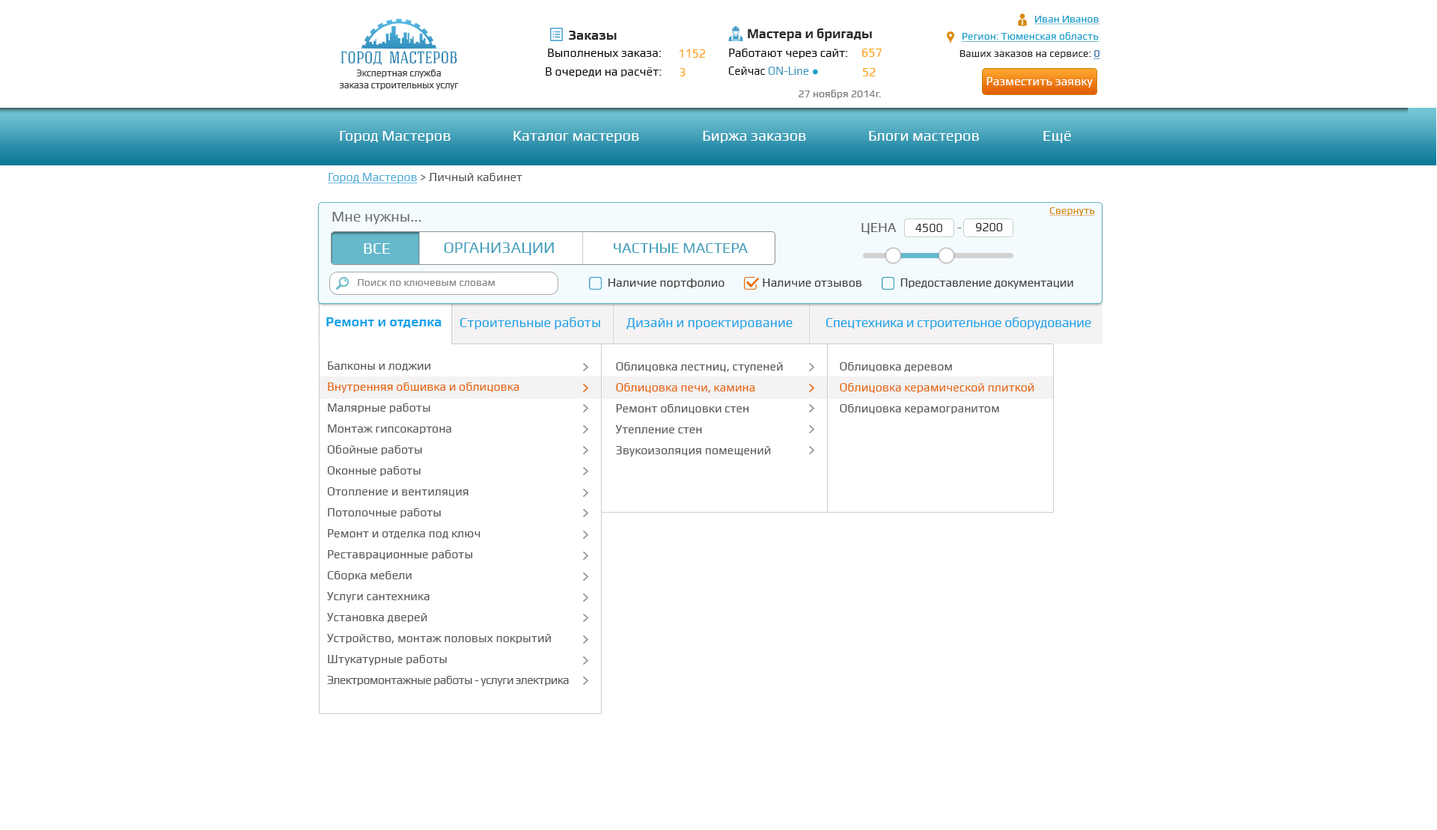
<style>
.page{position:relative;width:1437px;height:830px;background:#ffffff}
.page>*{position:absolute;margin:0}
.t1{font:10.5px "Play";color:#179ecb;text-decoration:underline}
.t2{font:13.2px "Play-Bold";color:#2a2a2a}
.t3{font:13.5px "Play-Bold";color:#2a2a2a}
.t4{font:10.5px "Play";color:#19a0cc;text-decoration:underline}
.t5{font:12px "Play";color:#000000}
.t6{font:11.9px "Play";color:#ff9e07}
.t7{font:12px "Play";color:#ff9e07}
.t8{font:10.5px "Play";color:#2a2a2a}
.t9{font:10.5px "Play";color:#226da7;text-decoration:underline}
.t10{font:9.7px "Play";letter-spacing:-0.016em;color:#403f3f}
.t11{font:12px "Play";color:#3c95bf;scale:0.95 1}
.t12{font:12px "Play";color:#000000;scale:0.95 1}
.t13{font:12px "Play";color:#ffffff}
.t14{font:10.5px "Play";color:#7a7a7a}
.t15{font:15px "Play";color:#ffffff}
.t16{font:12px "Play";color:#565656}
.t17{font:12px "Play";color:#4daeda;text-decoration:underline}
.t18{font:10.5px "Play";color:#da8a0d;text-decoration:underline}
.t19{font:15px "Play";color:#707070}
.t20{font:13.5px "Play";color:#5f5f5f}
.t21{font:12.2px "Play";color:#272727}
.t22{font:12px "Play";color:#726b6b}
.t23{font:12px "Play";color:#272727}
.t24{font:15.7px "Play";color:#ffffff}
.t25{font:15.7px "Play";color:#45a1bc}
.t26{font:15px "Play";color:#45a1bc}
.t27{font:10.5px "Play";color:#8a8989}
.t28{font:12px "Play";color:#3a3a3a}
.t29{font:12px "Play";letter-spacing:-0.01em;color:#3a3a3a}
.t30{font:13.5px "Play-Bold";color:#1aa3e9}
.t31{font:13.6px "Play";color:#1aa3e9}
.t32{font:13.3px "Play";letter-spacing:-0.02em;color:#1aa3e9}
.t33{font:13.4px "Play";color:#1aa3e9}
.t34{font:12px/21px "Play";color:#575757}
.t35{font:12px/21px "Play";color:#e56407}
.t36{font:12px/21px "Play";letter-spacing:-0.04em;color:#575757}
</style>
<div class="page">
<p class="t1" style="left:1034px;top:16px;width:65px;height:9px">Иван Иванов</p>
<p class="t2" style="left:748px;top:28px;width:124px;height:13px">Мастера и бригады</p>
<p class="t3" style="left:569px;top:31px;width:48px;height:9px">Заказы</p>
<p class="t4" style="left:962px;top:32px;width:137px;height:10px">Регион: Тюменская область</p>
<p class="t5" style="left:548px;top:49px;width:114px;height:8px">Выполненых заказа:</p>
<p class="t6" style="left:679px;top:49px;width:26px;height:9px">1152</p>
<p class="t5" style="left:729px;top:49px;width:119px;height:9px">Работают через сайт:</p>
<p class="t7" style="left:862px;top:49px;width:20px;height:8px">657</p>
<p class="t8" style="left:959px;top:50px;width:141px;height:9px">Ваших заказов на сервисе: <span class="t9">0</span></p>
<p class="t10" style="left:339px;top:70px;width:120px;height:20px;text-align:center">Экспертная служба <br>заказа строительных услуг</p>
<p class="t5" style="left:546px;top:67px;width:116px;height:10px">В очереди на расчёт:</p>
<p class="t6" style="left:679px;top:68px;width:6px;height:8px">3</p>
<p class="t11" style="left:728px;top:67px;width:81px;height:8px"><span class="t12">Сейчас </span>ON-Line</p>
<p class="t7" style="left:863px;top:68px;width:13px;height:8px">52</p>
<p class="t13" style="left:986px;top:77px;width:107px;height:11px">Разместить заявку</p>
<p class="t14" style="left:798px;top:90px;width:83px;height:9px">27 ноября 2014г.</p>
<p class="t15" style="left:340px;top:131px;width:111px;height:12px">Город Мастеров</p>
<p class="t15" style="left:513px;top:131px;width:126px;height:12px">Каталог мастеров</p>
<p class="t15" style="left:703px;top:131px;width:103px;height:12px">Биржа заказов</p>
<p class="t15" style="left:869px;top:131px;width:110px;height:12px">Блоги мастеров</p>
<p class="t15" style="left:1043px;top:131px;width:28px;height:12px">Ещё</p>
<p class="t16" style="left:328px;top:173px;width:194px;height:10px"><span class="t17">Город Мастеров </span>&gt; Личный кабинет</p>
<p class="t18" style="left:1049px;top:207px;width:46px;height:9px">Свернуть</p>
<p class="t19" style="left:332px;top:212px;width:89px;height:13px">Мне нужны...</p>
<p class="t20" style="left:861px;top:223px;width:36px;height:11px">ЦЕНА</p>
<p class="t21" style="left:915px;top:224px;width:27px;height:8px">4500</p>
<p class="t22" style="left:957px;top:227px;width:5px;height:1px">-</p>
<p class="t23" style="left:976px;top:223px;width:27px;height:8px">9200</p>
<p class="t24" style="left:364px;top:243px;width:26px;height:11px">ВСЕ</p>
<p class="t25" style="left:444px;top:242px;width:110px;height:13px">ОРГАНИЗАЦИИ</p>
<p class="t26" style="left:614px;top:243px;width:134px;height:10px">ЧАСТНЫЕ МАСТЕРА</p>
<p class="t27" style="left:358px;top:279px;width:137px;height:7px">Поиск по ключевым словам</p>
<p class="t28" style="left:608px;top:278px;width:116px;height:10px">Наличие портфолио</p>
<p class="t28" style="left:763px;top:278px;width:99px;height:9px">Наличие отзывов</p>
<p class="t29" style="left:900px;top:278px;width:173px;height:11px">Предоставление документации</p>
<p class="t30" style="left:326px;top:317px;width:116px;height:11px">Ремонт и отделка</p>
<p class="t31" style="left:460px;top:317px;width:140px;height:12px">Строительные работы</p>
<p class="t32" style="left:826px;top:317px;width:265px;height:13px">Спецтехника и строительное оборудование</p>
<p class="t33" style="left:626px;top:318px;width:166px;height:11px">Дизайн и проектирование</p>
<p class="t34" style="left:327px;top:361px;width:242px;height:325px">Балконы и лоджии<br><span class="t35">Внутренняя обшивка и облицовка                      <br></span>Малярные работы<br>Монтаж гипсокартона<br>Обойные работы<br>Оконные работы<br>Отопление и вентиляция<br>Потолочные работы<br>Ремонт и отделка под ключ<br>Реставрационные работы<br>Сборка мебели<br>Услуги сантехника<br>Установка дверей<br>Устройство, монтаж половых покрытий<br>Штукатурные работы<br><span class="t36">Электромонтажные работы - услуги электрика</span></p>
<p class="t34" style="left:615px;top:362px;width:168px;height:94px">Облицовка лестниц, ступеней<br><span class="t35">Облицовка печи, камина                    <br></span>Ремонт облицовки стен<br>Утепление стен<br>Звукоизоляция помещений</p>
<p class="t35" style="left:840px;top:362px;width:194px;height:52px"><span class="t34">Облицовка деревом<br></span>Облицовка керамической плиткой<br><span class="t34">Облицовка керамогранитом</span></p>
</div>
